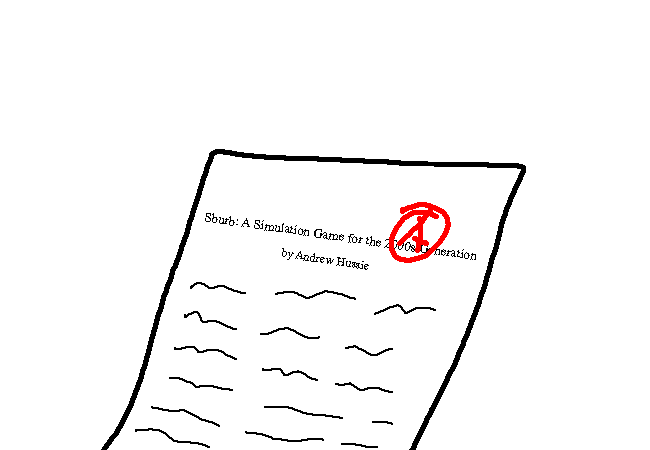
<style>
.page{position:relative;width:650px;height:450px;background:#ffffff}
.page>*{position:absolute;margin:0}
.t1{font:13.1px "TimesNewRomanPSMT";color:#000000}
.t2{font:12px "TimesNewRomanPSMT";color:#000000}
</style>
<div class="page">
<p class="t1" style="left:205px;top:213px;width:271px;height:47px;rotate:8deg">Sburb: A Simulation Game for the 2000s Generation</p>
<p class="t2" style="left:282px;top:248px;width:87px;height:22px;rotate:9deg">by Andrew Hussie</p>
</div>
